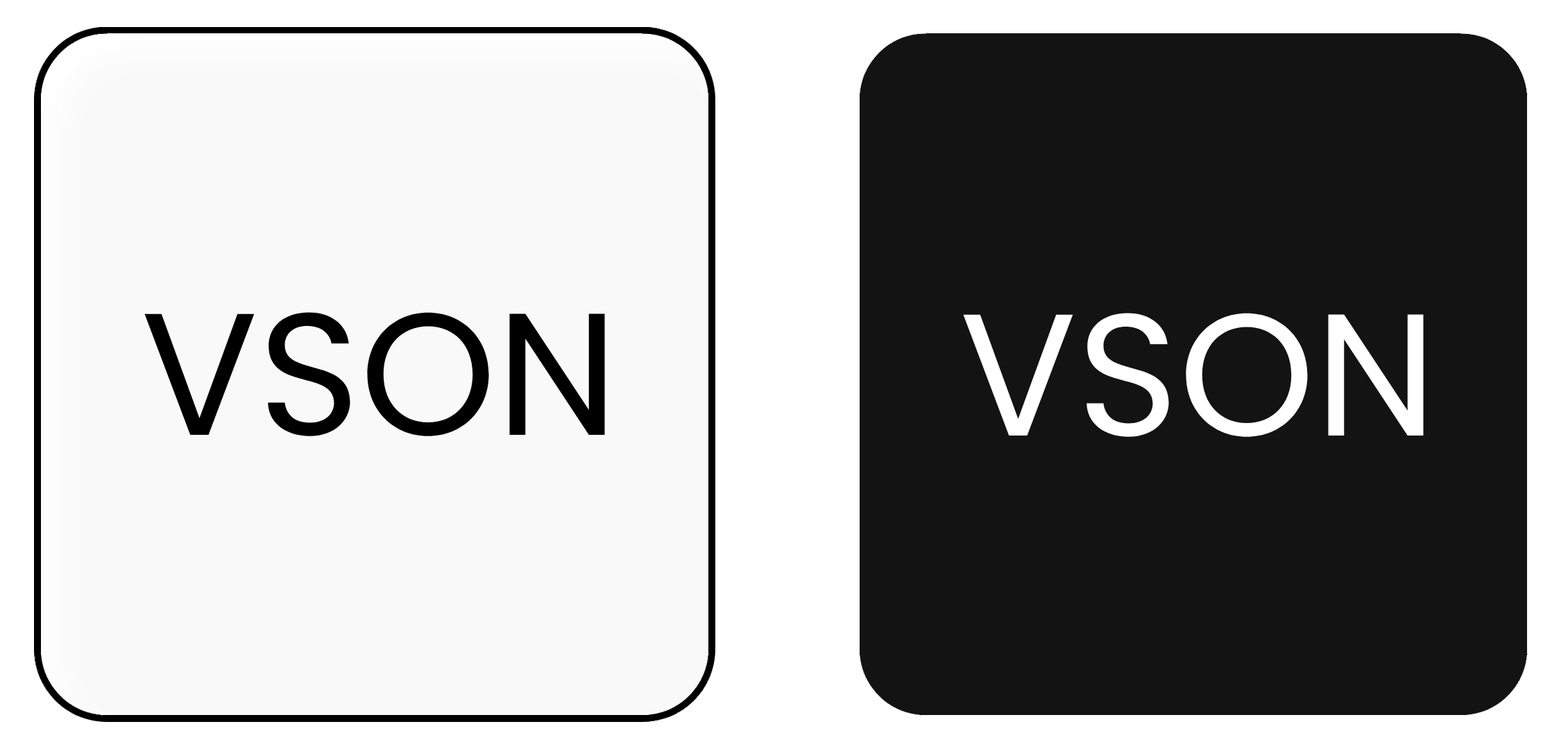
<style>
.page{position:relative;width:1568px;height:749px;background:#131313}
.page>*{position:absolute;margin:0}
.t1{font:173.5px "Poppins-Regular";color:#000000}
.t2{font:173.5px "Poppins-Regular";color:#ffffff}
</style>
<div class="page">
<p class="t1" style="left:144px;top:312px;width:461px;height:124px">VSON</p>
<p class="t2" style="left:963px;top:313px;width:461px;height:124px">VSON</p>
</div>
